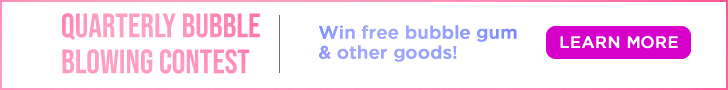
<style>
.page{position:relative;width:728px;height:90px;background:#ffffff}
.page>*{position:absolute;margin:0}
.t1{font:18px/20px "iCielGotham-Medium";color:#9aa2ff;font-weight:bold}
.t2{font:16.5px "iCielGotham-Medium";color:#ffffff;font-weight:bold}
</style>
<div class="page">
<p class="t1" style="left:319px;top:25px;width:198px;height:37px">Win free bubble gum<br>&amp; other goods!</p>
<p class="t2" style="left:560px;top:36px;width:118px;height:13px">LEARN MORE</p>
</div>
